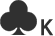
<style>
.page{position:relative;width:55px;height:36px;background:#ffffff}
.page>*{position:absolute;margin:0}
.t1{font:23.4px "MyriadPro-Regular";letter-spacing:-0.1em;color:#303030;font-weight:bold}
</style>
<div class="page">
<p class="t1" style="left:41px;top:19px;width:12px;height:17px">K</p>
</div>
